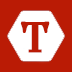
<style>
.page{position:relative;width:72px;height:72px;background:#ba1b05}
.page>*{position:absolute;margin:0}
.t1{font:43.5px "Slavianskiy-Regular";color:#ba1b05;text-transform:uppercase;font-weight:bold;scale:0.87 1}
</style>
<div class="page">
<p class="t1" style="left:20px;top:21px;width:30px;height:32px">T</p>
</div>
